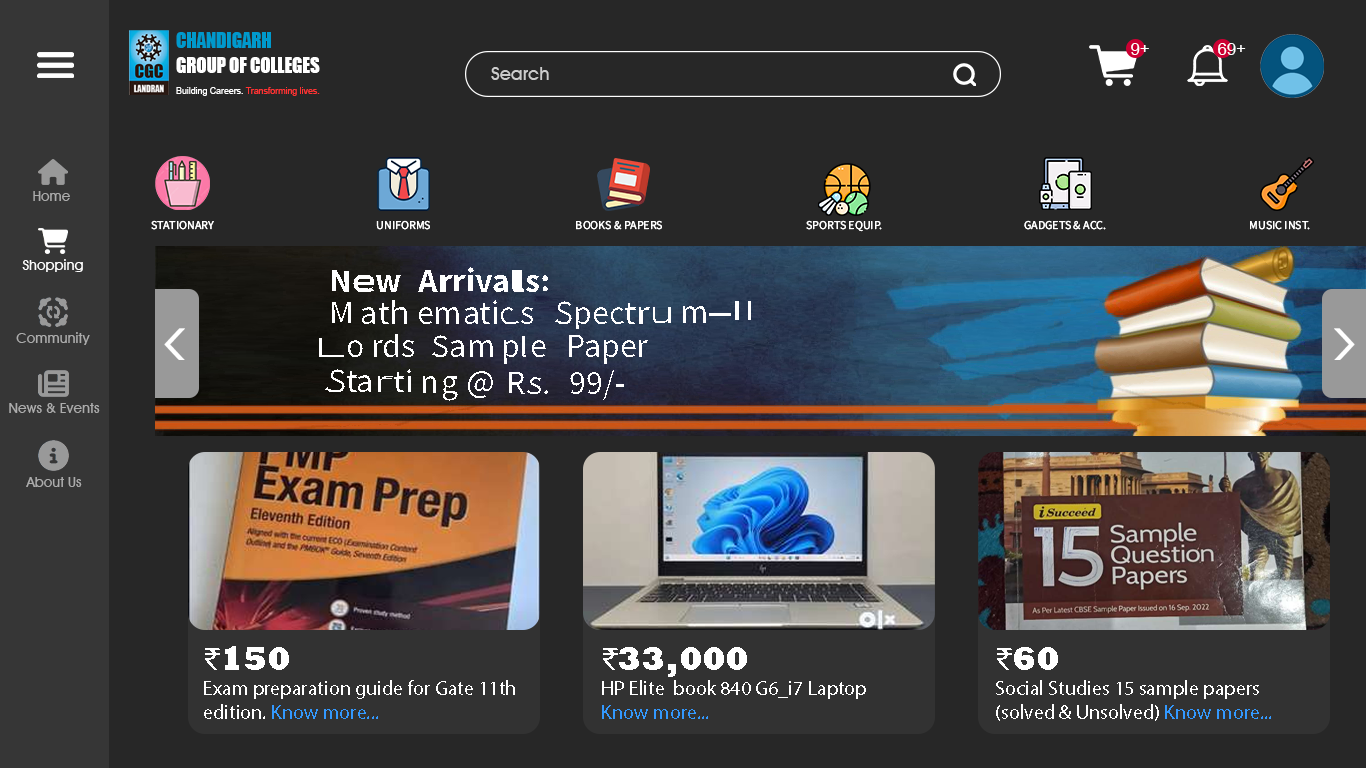
<style>
.page{position:relative;width:1366px;height:768px;background:#272727}
.page>*{position:absolute;margin:0}
.t1{font:20.2px "Impact";color:#ffffff;scale:0.92 1}
.t2{font:20.2px "Impact";color:#0099cc;scale:0.92 1}
.t3{font:16.6px "ArialMT";color:#ffffff}
.t4{font:18.4px "AvantGardeITCbyBT-Medium";color:#cccccc}
.t5{font:9.6px "ArialMT";color:#ff3333;scale:0.92 1}
.t6{font:9.6px "ArialMT";color:#ffffff;scale:0.92 1}
.t7{font:14px "AvantGardeITCbyBT-Medium";color:#acacac}
.t8{font:12px "SourceSansRoman-Regular";color:#ffffff}
.t9{font:14px "AvantGardeITCbyBT-Medium";color:#ffffff}
.t10{font:34px "Rockwell-ExtraBold";color:#ffffff}
.t11{font:34px "MyriadPro-Regular";color:#ffffff}
.t12{font:20px "MyriadPro-Regular";color:#ffffff}
.t13{font:20px "MyriadPro-Regular";color:#3399ff}
</style>
<div class="page">
<p class="t1" style="left:176px;top:32px;width:144px;height:41px"><span class="t2">CHANDIGARH<br></span>GROUP OF COLLEGES</p>
<p class="t3" style="left:1131px;top:43px;width:18px;height:12px">9+</p>
<p class="t3" style="left:1218px;top:43px;width:28px;height:12px">69+</p>
<p class="t4" style="left:491px;top:67px;width:58px;height:13px">Search</p>
<p class="t5" style="left:176px;top:87px;width:144px;height:9px"><span class="t6">Building Careers. </span>Transforming lives.</p>
<p class="t7" style="left:33px;top:191px;width:37px;height:10px">Home</p>
<p class="t8" style="left:151px;top:220px;width:63px;height:10px">STATIONARY</p>
<p class="t8" style="left:376px;top:220px;width:54px;height:10px">UNIFORMS</p>
<p class="t8" style="left:576px;top:220px;width:86px;height:10px">BOOKS &amp; PAPERS</p>
<p class="t8" style="left:806px;top:220px;width:76px;height:12px">SPORTS EQUIP.</p>
<p class="t8" style="left:1024px;top:220px;width:82px;height:10px">GADGETS &amp; ACC.</p>
<p class="t8" style="left:1250px;top:220px;width:60px;height:10px">MUSIC INST.</p>
<p class="t9" style="left:22px;top:259px;width:61px;height:13px">Shopping</p>
<p class="t7" style="left:16px;top:332px;width:74px;height:13px">Community</p>
<p class="t7" style="left:9px;top:403px;width:91px;height:10px">News &amp; Events</p>
<p class="t7" style="left:26px;top:477px;width:56px;height:10px">About Us</p>
<p class="t10" style="left:205px;top:646px;width:84px;height:24px"><span class="t11">₹</span>150</p>
<p class="t10" style="left:603px;top:647px;width:144px;height:30px"><span class="t11">₹</span>33,000</p>
<p class="t10" style="left:997px;top:647px;width:61px;height:23px"><span class="t11">₹</span>60</p>
<p class="t12" style="left:204px;top:680px;width:311px;height:39px">Exam preparation guide for Gate 11th edition. <span class="t13">Know more...</span></p>
<p class="t12" style="left:602px;top:680px;width:264px;height:39px">HP Elite  book 840 G6_i7 Laptop<br><span class="t13">Know more...</span></p>
<p class="t12" style="left:996px;top:680px;width:275px;height:41px">Social Studies 15 sample papers (solved &amp; Unsolved) <span class="t13">Know more...</span></p>
</div>
